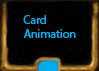
<style>
.page{position:relative;width:99px;height:71px;background:#000000}
.page>*{position:absolute;margin:0}
.t1{font:12px "MyriadPro-Regular";color:#00aeef}
</style>
<div class="page">
<p class="t1" style="left:23px;top:15px;width:53px;height:23px">Card<br>Animation</p>
</div>
